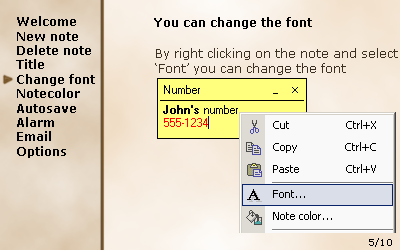
<style>
.page{position:relative;width:400px;height:250px}
.page>*{position:absolute;margin:0}
.t1{font:12px "Verdana-Bold";color:#010101}
.t2{font:12px "Verdana-Bold";color:#000000}
.t3{font:12px "Verdana";color:#3b3022}
.t4{font:9px "Verdana";color:#000000}
</style>
<div class="page">
<p class="t1" style="left:16px;top:16px;width:79px;height:142px">Welcome<br>New note<br>Delete note<br>Title<br>Change font<br>Notecolor<br>Autosave<br>Alarm<br>Email<br>Options</p>
<p class="t2" style="left:154px;top:17px;width:158px;height:12px">You can change the font</p>
<p class="t3" style="left:155px;top:48px;width:243px;height:27px">By right clicking on the note and select<br>‘Font’ you can change the font</p>
<p class="t4" style="left:369px;top:238px;width:23px;height:9px">5/10</p>
</div>
